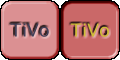
<style>
.page{position:relative;width:120px;height:60px;background:#db9092}
.page>*{position:absolute;margin:0}
.t1{font:18px "LucidaSans";color:#414058}
.t2{font:18px "LucidaSans";color:#cebe38}
</style>
<div class="page">
<p class="t1" style="left:10px;top:23px;width:39px;height:14px">TiVo</p>
<p class="t2" style="left:70px;top:23px;width:39px;height:14px">TiVo</p>
</div>
